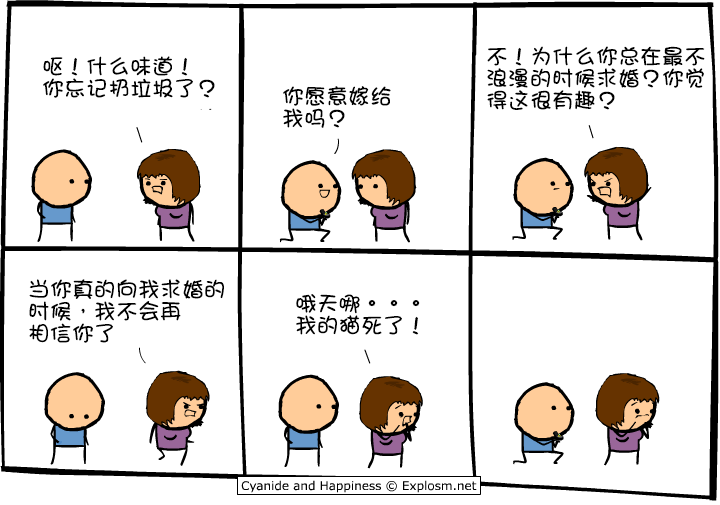
<style>
.page{position:relative;width:720px;height:505px;background:#ffffff}
.page>*{position:absolute;margin:0}
.t1{font:22px/22px "DFGirl";color:#000000}
</style>
<div class="page">
<p class="t1" style="left:487px;top:46px;width:218px;height:64px">不！为什么你总在最不<br>浪漫的时候求婚？你觉<br>得这很有趣？</p>
<p class="t1" style="left:43px;top:56px;width:172px;height:42px">呕！什么味道！<br>你忘记扔垃圾了？</p>
<p class="t1" style="left:283px;top:86px;width:108px;height:42px">你愿意嫁给<br>我吗？</p>
<p class="t1" style="left:29px;top:279px;width:195px;height:64px">当你真的向我求婚的<br>时候，我不会再<br>相信你了</p>
<p class="t1" style="left:296px;top:294px;width:124px;height:41px">哦天哪。。。<br>我的猫死了！</p>
</div>
